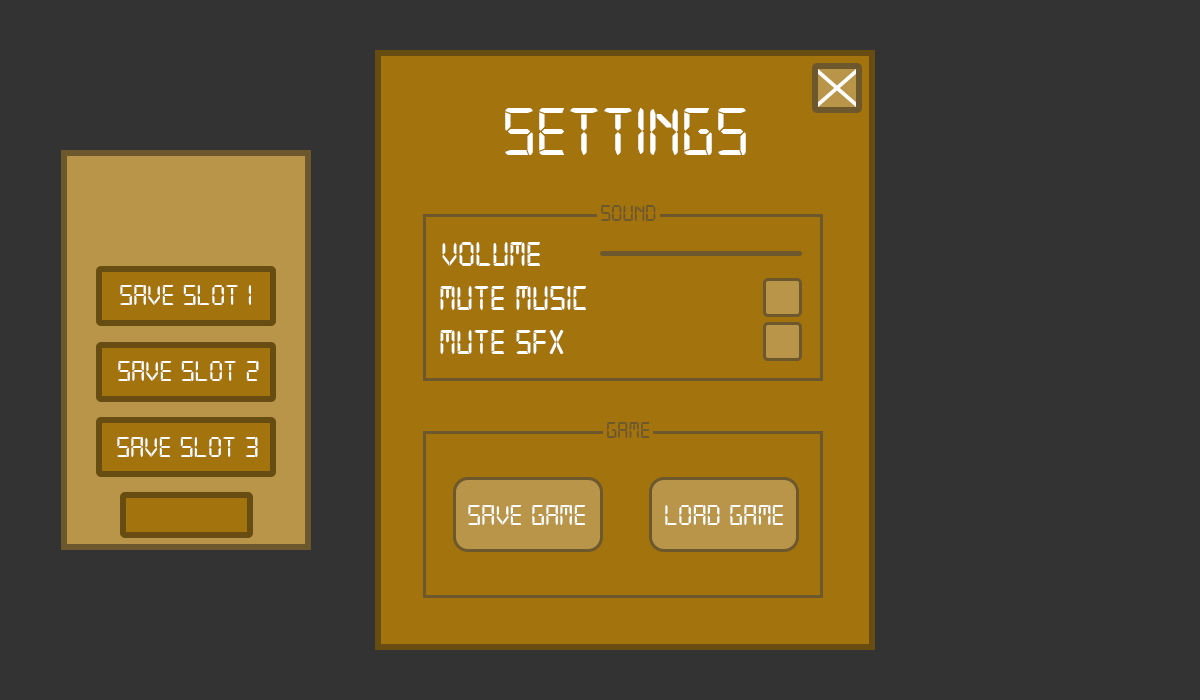
<style>
.page{position:relative;width:1200px;height:700px;background:#333333}
.page>*{position:absolute;margin:0}
.t1{font:72px "Digital-7";color:#fffffe}
.t2{font:24px "Digital-7";color:#6c582c}
.t3{font:36px "Digital-7";color:#fffffe}
.t4{font:30px "Digital-7";color:#fefefe}
.t5{font:30px "Digital-7";color:#ffffff}
</style>
<div class="page">
<p class="t1" style="left:505px;top:108px;width:241px;height:47px">SETTIngs</p>
<p class="t2" style="left:601px;top:205px;width:55px;height:16px">sound</p>
<p class="t3" style="left:442px;top:242px;width:98px;height:24px">VOLUME</p>
<p class="t4" style="left:120px;top:285px;width:131px;height:20px">SAVE SLOT 1</p>
<p class="t3" style="left:440px;top:286px;width:146px;height:24px">Mute music</p>
<p class="t3" style="left:440px;top:330px;width:124px;height:24px">mute sfx</p>
<p class="t4" style="left:118px;top:361px;width:141px;height:20px">SAVE SLOT 2</p>
<p class="t2" style="left:607px;top:422px;width:43px;height:16px">GAME</p>
<p class="t4" style="left:117px;top:437px;width:141px;height:20px">SAVE SLOT 3</p>
<p class="t5" style="left:468px;top:505px;width:118px;height:20px">SAVE GAME</p>
<p class="t5" style="left:665px;top:505px;width:119px;height:20px">LOAD GAME</p>
</div>
